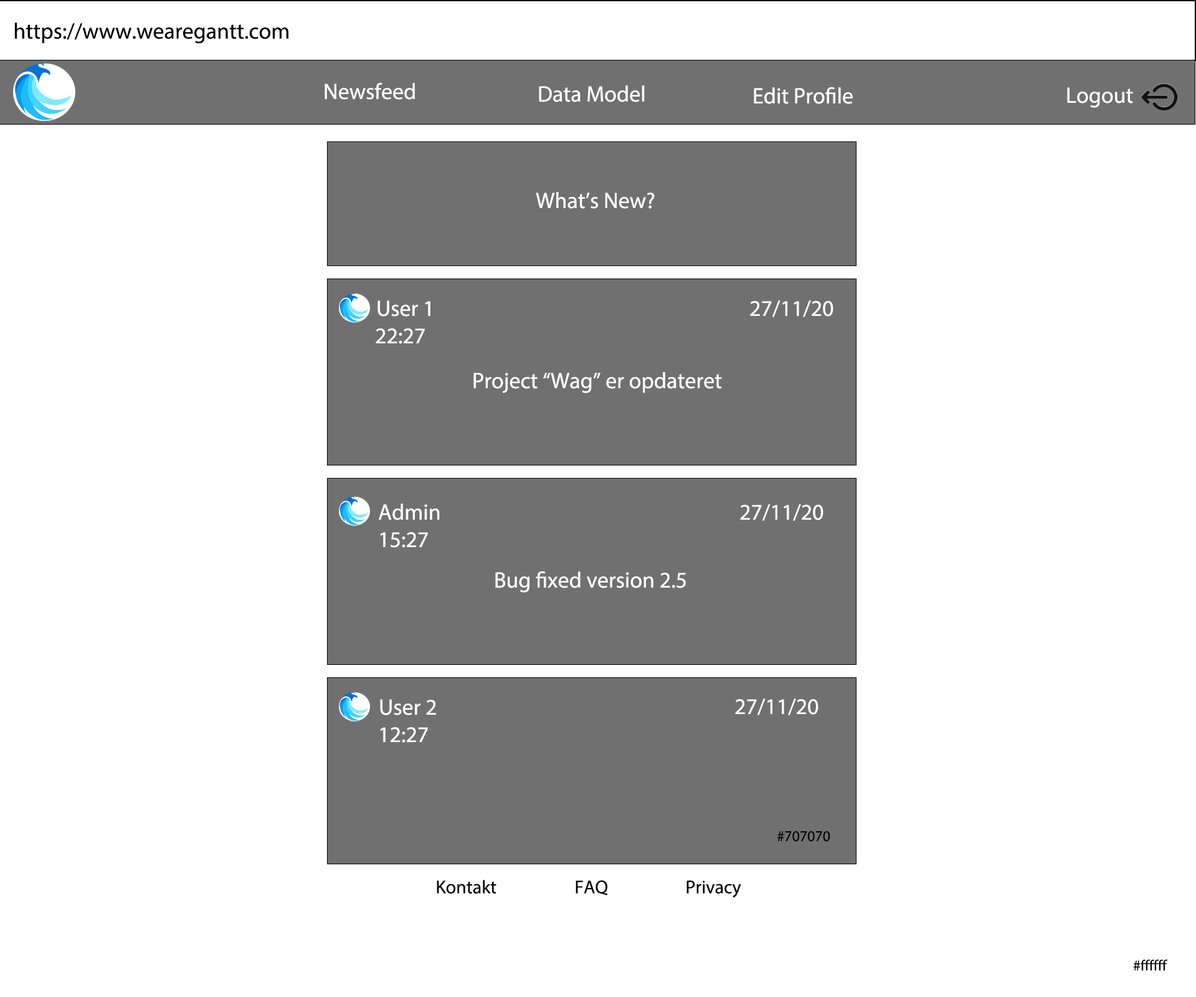
<style>
.page{position:relative;width:1196px;height:997px;background:#ffffff}
.page>*{position:absolute;margin:0}
.t1{font:22.4px "MyriadPro-Regular";color:#000000}
.t2{font:22.4px "MyriadPro-Regular";color:#ffffff}
.t3{font:15px "MyriadPro-Regular";color:#000000}
.t4{font:18.7px "MyriadPro-Regular";color:#000000}
</style>
<div class="page">
<p class="t1" style="left:14px;top:22px;width:274px;height:22px">https://www.wearegantt.com</p>
<p class="t2" style="left:325px;top:82px;width:90px;height:18px">Newsfeed</p>
<p class="t2" style="left:539px;top:85px;width:106px;height:17px">Data Model</p>
<p class="t2" style="left:754px;top:87px;width:99px;height:17px">Edit Profile</p>
<p class="t2" style="left:1067px;top:87px;width:66px;height:21px">Logout</p>
<p class="t2" style="left:536px;top:192px;width:119px;height:17px">What’s New?</p>
<p class="t2" style="left:378px;top:300px;width:53px;height:16px">User 1</p>
<p class="t2" style="left:750px;top:300px;width:84px;height:17px">27/11/20</p>
<p class="t2" style="left:376px;top:328px;width:49px;height:16px">22:27</p>
<p class="t2" style="left:473px;top:372px;width:249px;height:21px">Project “Wag” er opdateret</p>
<p class="t2" style="left:378px;top:503px;width:62px;height:17px">Admin</p>
<p class="t2" style="left:740px;top:504px;width:84px;height:17px">27/11/20</p>
<p class="t2" style="left:380px;top:532px;width:48px;height:16px">15:27</p>
<p class="t2" style="left:495px;top:571px;width:191px;height:21px">Bug fixed version 2.5</p>
<p class="t2" style="left:380px;top:699px;width:56px;height:16px">User 2</p>
<p class="t2" style="left:735px;top:698px;width:84px;height:17px">27/11/20</p>
<p class="t2" style="left:380px;top:727px;width:48px;height:16px">12:27</p>
<p class="t3" style="left:778px;top:830px;width:52px;height:12px">#707070</p>
<p class="t4" style="left:437px;top:880px;width:60px;height:13px">Kontakt</p>
<p class="t4" style="left:576px;top:880px;width:32px;height:15px">FAQ</p>
<p class="t4" style="left:687px;top:880px;width:54px;height:18px">Privacy</p>
<p class="t3" style="left:1133px;top:959px;width:35px;height:12px">#ffffff</p>
</div>
